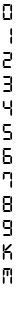
<style>
.page{position:relative;width:16px;height:312px;background:#ffffff}
.page>*{position:absolute;margin:0}
.t1{font:24px "Digital-7Mono";letter-spacing:0.05em;color:#000000}
</style>
<div class="page">
<p class="t1" style="left:2px;top:4px;width:11px;height:16px">0</p>
<p class="t1" style="left:10px;top:28px;width:3px;height:16px">1</p>
<p class="t1" style="left:2px;top:52px;width:11px;height:16px">2</p>
<p class="t1" style="left:2px;top:76px;width:11px;height:16px">3</p>
<p class="t1" style="left:2px;top:100px;width:11px;height:16px">4</p>
<p class="t1" style="left:2px;top:124px;width:11px;height:16px">5</p>
<p class="t1" style="left:2px;top:148px;width:11px;height:16px">6</p>
<p class="t1" style="left:2px;top:172px;width:11px;height:16px">7</p>
<p class="t1" style="left:2px;top:196px;width:11px;height:16px">8</p>
<p class="t1" style="left:2px;top:220px;width:11px;height:16px">9</p>
<p class="t1" style="left:2px;top:244px;width:11px;height:16px">k</p>
<p class="t1" style="left:2px;top:268px;width:11px;height:16px">m</p>
</div>
